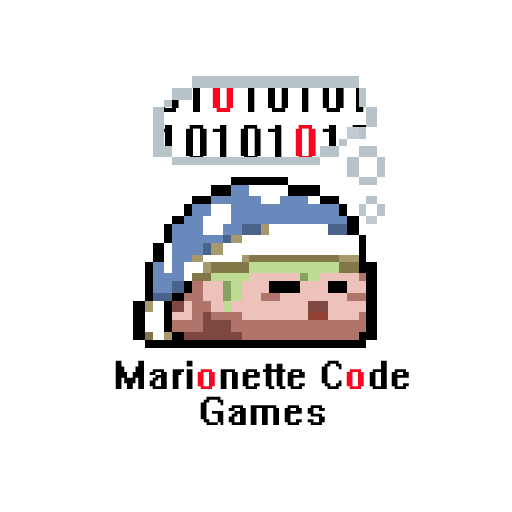
<style>
.page{position:relative;width:512px;height:512px;background:#ffffff}
.page>*{position:absolute;margin:0}
.t1{font:36px/36px "System";color:#000000}
.t2{font:36px/36px "System";color:#fb0520}
</style>
<div class="page">
<p class="t1" style="left:115px;top:360px;width:294px;height:65px;text-align:center">Mari<span class="t2">o</span>nette C<span class="t2">o</span>de Games</p>
</div>
